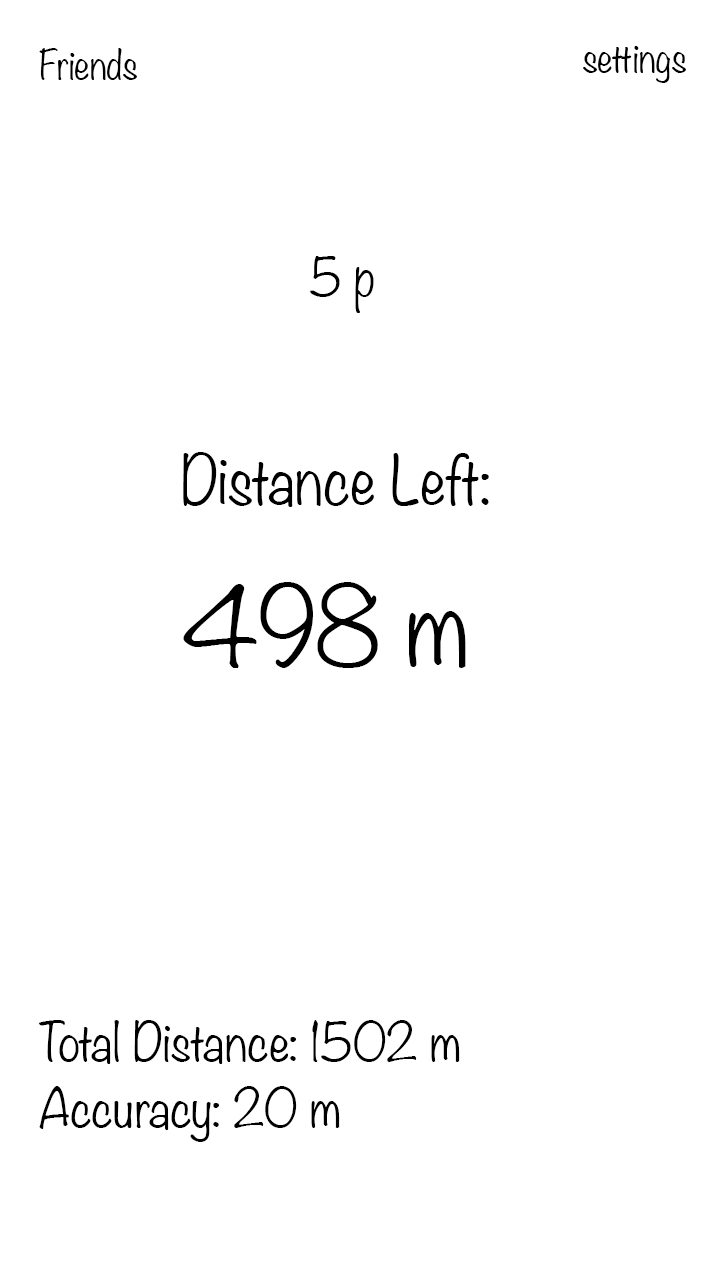
<style>
.page{position:relative;width:720px;height:1280px;background:#ffffff}
.page>*{position:absolute;margin:0}
.t1{font:36px "Noteworthy-Light";color:#000000}
.t2{font:48px "Noteworthy-Light";color:#000000}
.t3{font:60px "Noteworthy-Light";color:#000000}
.t4{font:98px "Noteworthy-Light";color:#000000}
</style>
<div class="page">
<p class="t1" style="left:39px;top:48px;width:98px;height:32px">Friends</p>
<p class="t1" style="left:583px;top:46px;width:103px;height:37px">settings</p>
<p class="t2" style="left:310px;top:256px;width:64px;height:57px">5 p</p>
<p class="t3" style="left:183px;top:452px;width:306px;height:55px">Distance Left:</p>
<p class="t4" style="left:183px;top:582px;width:283px;height:86px">498 m</p>
<p class="t2" style="left:38px;top:1020px;width:422px;height:44px">Total Distance: 1502 m</p>
<p class="t2" style="left:39px;top:1086px;width:301px;height:56px">Accuracy: 20 m</p>
</div>
